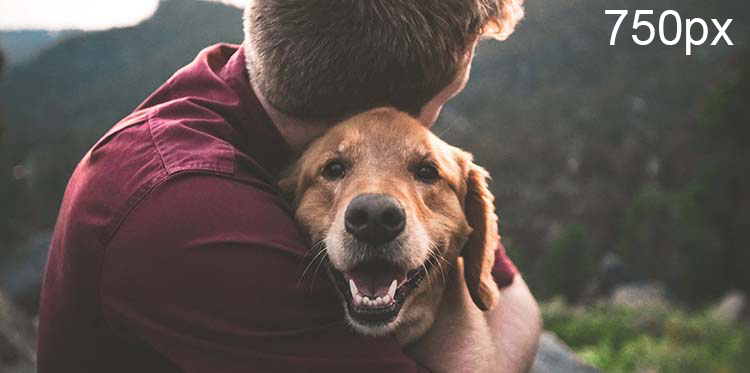
<style>
.page{position:relative;width:750px;height:373px}
.page>*{position:absolute;margin:0}
.t1{font:48px "ArialMT";color:#ffffff}
</style>
<div class="page">
<p class="t1" style="left:605px;top:10px;width:129px;height:45px">750px</p>
</div>
